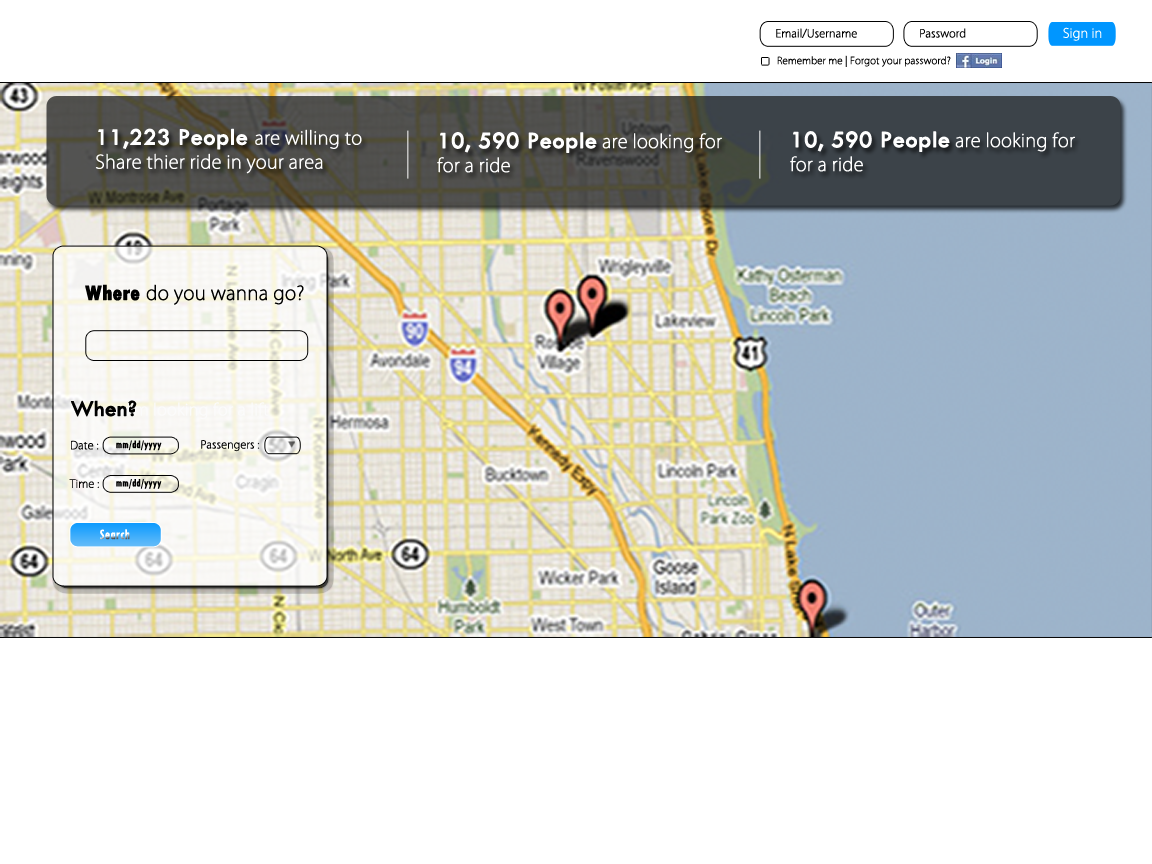
<style>
.page{position:relative;width:1152px;height:864px;background:#ffffff}
.page>*{position:absolute;margin:0}
.t1{font:10.7px "KozGoPr6N-ExtraLight";color:#000000;font-weight:bold}
.t2{font:12.5px "KozGoPr6N-ExtraLight";color:#ffffff;font-weight:bold}
.t3{font:9.6px "KozGoPr6N-ExtraLight";color:#000000;font-weight:bold}
.t4{font:18px/24px "KozGoPr6N-ExtraLight";color:#ffffff;font-weight:bold}
.t5{font:24px/24px "TwCenMT-Regular";color:#ffffff;font-weight:bold}
.t6{font:18px/24px "KozGoPr6N-ExtraLight";color:#fefefe;font-weight:bold}
.t7{font:24px/24px "TwCenMT-Regular";color:#fefefe;font-weight:bold}
.t8{font:18.6px "KozGoPr6N-ExtraLight";color:#000000;font-weight:bold}
.t9{font:21.5px "TwCenMT-CondensedExtraBold";color:#000000;font-weight:bold}
.t10{font:23px "TwCenMT-Regular";color:#000000;font-weight:bold}
.t11{font:11.1px "TwCenMT-Condensed";color:#000000;font-weight:bold}
.t12{font:10.6px "KozGoPr6N-ExtraLight";color:#000000;font-weight:bold}
.t13{font:10.8px "KozGoPr6N-ExtraLight";color:#000000;font-weight:bold}
.t14{font:14.5px "TwCenMT-Condensed";font-weight:bold}
</style>
<div class="page">
<p class="t1" style="left:776px;top:28px;width:81px;height:10px">Email/Username</p>
<p class="t1" style="left:920px;top:28px;width:46px;height:10px">Password</p>
<p class="t2" style="left:1063px;top:27px;width:39px;height:14px">Sign in</p>
<p class="t3" style="left:777px;top:55px;width:174px;height:12px">Remember me | Forgot your password?</p>
<p class="t4" style="left:95px;top:128px;width:267px;height:46px"><span class="t5">11,223 People </span>are willing to <br>Share thier ride in your area</p>
<p class="t4" style="left:437px;top:132px;width:285px;height:41px"><span class="t5">10, 590 People</span> are looking for <br>for a ride</p>
<p class="t6" style="left:790px;top:131px;width:285px;height:41px"><span class="t7">10, 590 People</span> are looking for <br>for a ride</p>
<p class="t8" style="left:85px;top:284px;width:219px;height:21px"><span class="t9">Where </span>do you wanna go?</p>
<p class="t10" style="left:71px;top:400px;width:66px;height:17px">When?</p>
<p class="t1" style="left:71px;top:440px;width:28px;height:10px">Date :</p>
<p class="t11" style="left:116px;top:440px;width:46px;height:11px">mm/dd/yyyy</p>
<p class="t12" style="left:201px;top:440px;width:59px;height:12px">Passengers :</p>
<p class="t13" style="left:69px;top:479px;width:30px;height:9px">Time :</p>
<p class="t11" style="left:116px;top:479px;width:46px;height:10px">mm/dd/yyyy</p>
<p class="t14" style="left:100px;top:529px;width:30px;height:11px">Search</p>
</div>
